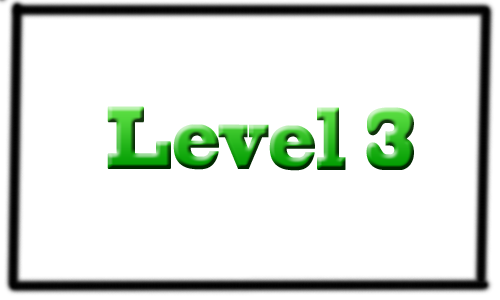
<style>
.page{position:relative;width:500px;height:300px;background:#ffffff}
.page>*{position:absolute;margin:0}
.t1{font:83.3px "BlackoakStd";scale:0.44 1}
</style>
<div class="page">
<p class="t1" style="left:107px;top:106px;width:307px;height:65px">Level 3</p>
</div>
